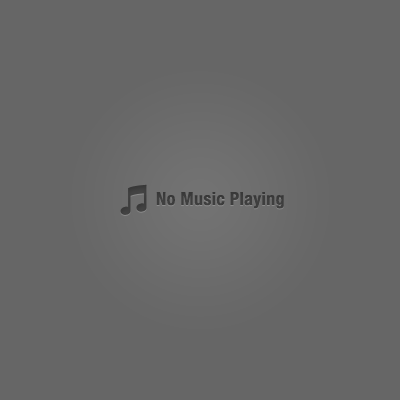
<style>
.page{position:relative;width:400px;height:400px;background:#666666}
.page>*{position:absolute;margin:0}
.t1{font:18px "HelveticaNeue-CondensedBold";letter-spacing:0.02em;color:#444444}
</style>
<div class="page">
<p class="t1" style="left:156px;top:192px;width:128px;height:17px">No Music Playing</p>
</div>
